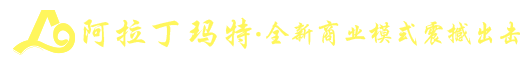
<style>
.page{position:relative;width:520px;height:63px;background:#ffffff}
.page>*{position:absolute;margin:0}
.t1{font:36px "-G-s-k-a-0-0-h";color:#fff65c}
.t2{font:26px "-G-s-k-a-0-0-h";color:#fff65c}
</style>
<div class="page">
<p class="t1" style="left:83px;top:17px;width:169px;height:32px">阿拉丁玛特</p>
<p class="t2" style="left:266px;top:20px;width:255px;height:26px">全新商业模式震撼出击</p>
<p class="t1" style="left:256px;top:31px;width:5px;height:6px">.</p>
</div>
